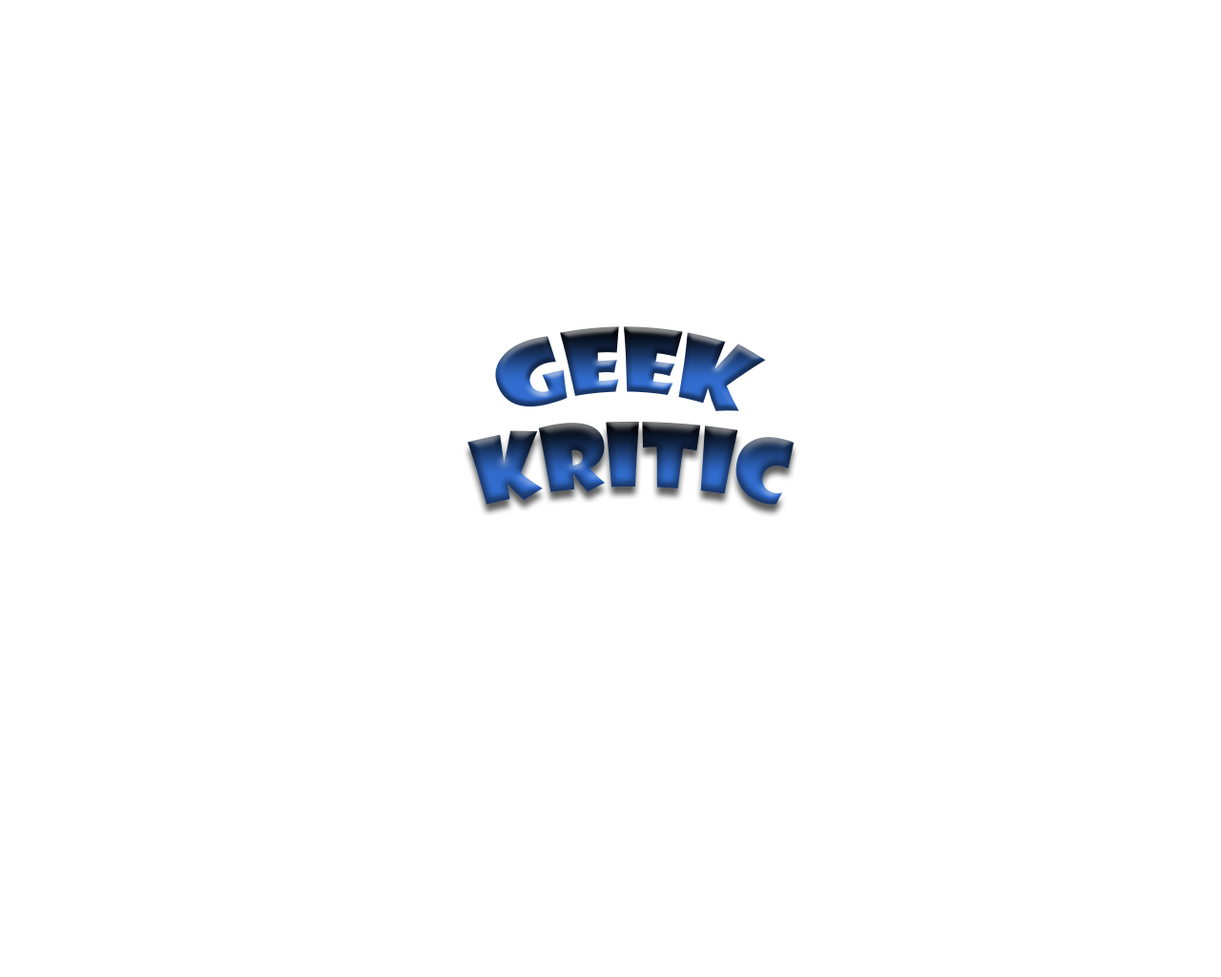
<style>
.page{position:relative;width:1221px;height:977px;background:#ffffff}
.page>*{position:absolute;margin:0}
.t1{font:85.8px "ShowcardGothic-Reg"}
</style>
<div class="page">
<p class="t1" style="left:495px;top:326px;width:271px;height:85px">Geek</p>
<p class="t1" style="left:467px;top:421px;width:328px;height:84px">Kritic</p>
</div>
